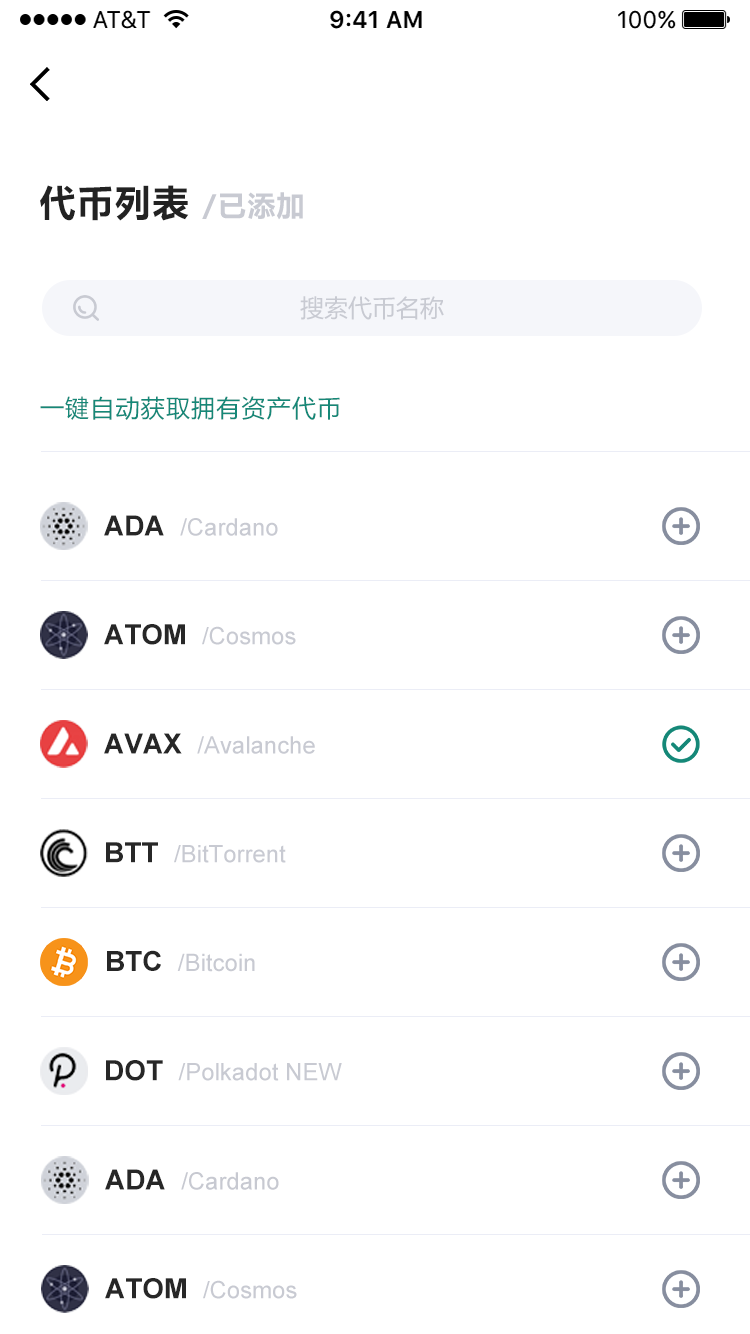
<style>
.page{position:relative;width:750px;height:1334px;background:#ffffff}
.page>*{position:absolute;margin:0}
.t1{font:36px "MicrosoftYaHei-Bold";letter-spacing:0.05em;color:#222222}
.t2{font:28px "MicrosoftYaHei-Bold";letter-spacing:0.05em;color:#c8cad2}
.t3{font:24px "MicrosoftYaHei";color:#c8cad2}
.t4{font:24px "MicrosoftYaHei";letter-spacing:0.05em;color:#158878}
.t5{font:24px "ArialMT";color:#c8cad2}
.t6{font:28px "Arial-BoldMT";color:#272727}
.t7{font:24px "ArialMT";color:#c7c9d1}
</style>
<div class="page">
<p class="t1" style="left:40px;top:185px;width:263px;height:36px">代币列表 <span class="t2">/已添加</span></p>
<p class="t3" style="left:300px;top:296px;width:144px;height:24px">搜索代币名称</p>
<p class="t4" style="left:40px;top:396px;width:300px;height:24px">一键自动获取拥有资产代币</p>
<p class="t5" style="left:104px;top:515px;width:174px;height:21px"><span class="t6">ADA  </span>/Cardano</p>
<p class="t5" style="left:104px;top:624px;width:192px;height:21px"><span class="t6">ATOM  </span>/Cosmos</p>
<p class="t5" style="left:104px;top:733px;width:211px;height:21px"><span class="t6">AVAX  </span>/Avalanche</p>
<p class="t5" style="left:106px;top:842px;width:180px;height:21px"><span class="t6">BTT  </span>/BitTorrent</p>
<p class="t5" style="left:107px;top:950px;width:148px;height:22px"><span class="t6">BTC  </span>/Bitcoin</p>
<p class="t5" style="left:106px;top:1060px;width:236px;height:21px"><span class="t6">DOT  </span>/Polkadot NEW</p>
<p class="t7" style="left:105px;top:1169px;width:174px;height:21px"><span class="t6">ADA  </span>/Cardano</p>
<p class="t5" style="left:105px;top:1278px;width:192px;height:21px"><span class="t6">ATOM  </span>/Cosmos</p>
</div>
